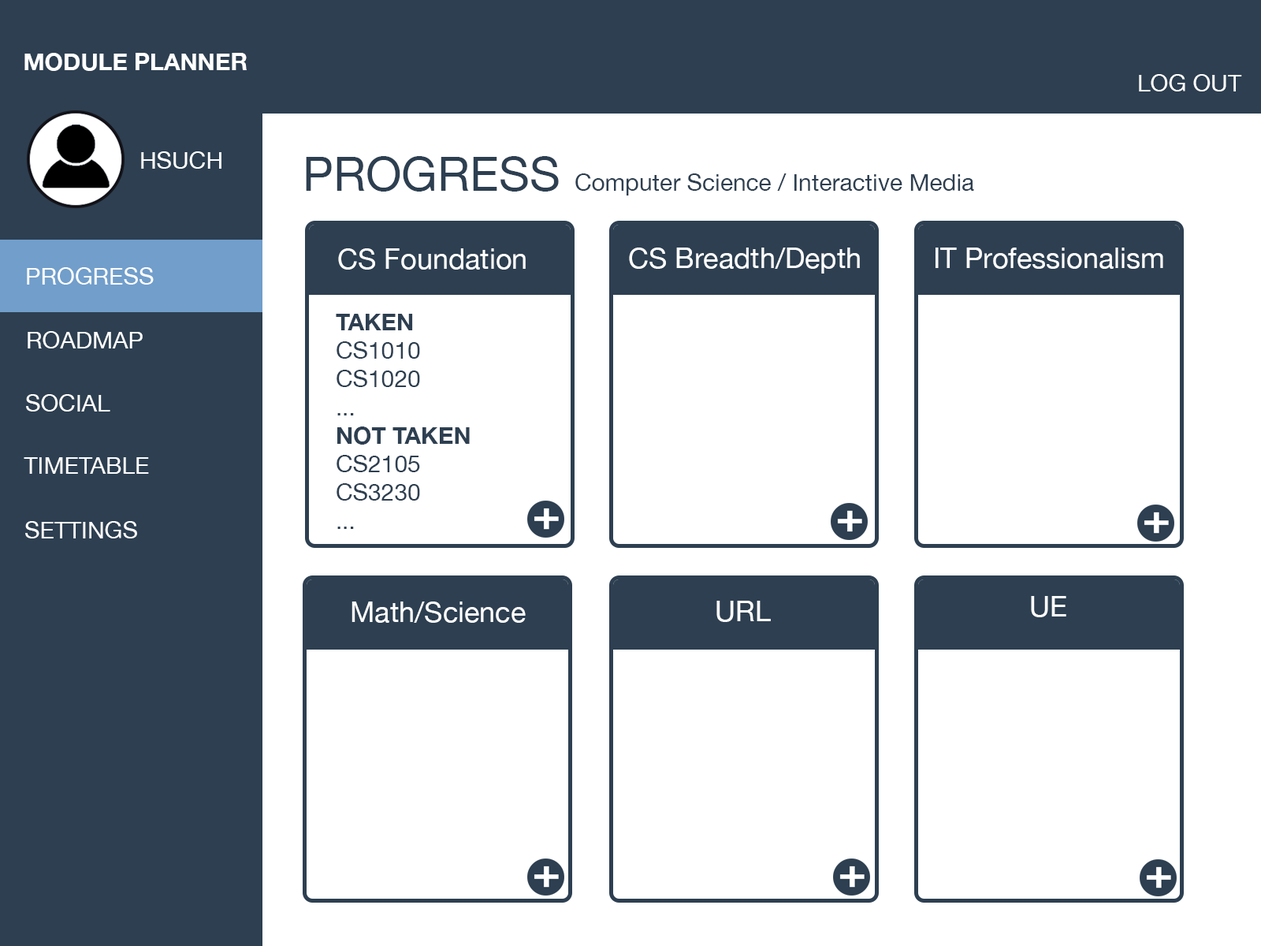
<style>
.page{position:relative;width:1261px;height:946px;background:#ffffff}
.page>*{position:absolute;margin:0}
.t1{font:23.6px "HelveticaNeue-Bold";color:#ffffff}
.t2{font:23.5px "HelveticaNeue";color:#ffffff}
.t3{font:47.3px "HelveticaNeue";color:#2d3f51}
.t4{font:23.6px "HelveticaNeue";color:#2d3f51}
.t5{font:28.4px "HelveticaNeue";color:#ffffff}
.t6{font:28.7px "HelveticaNeue";color:#ffffff}
.t7{font:23.6px "HelveticaNeue";color:#ffffff}
.t8{font:23.6px "HelveticaNeue-Bold";color:#2d3f51}
</style>
<div class="page">
<p class="t1" style="left:24px;top:53px;width:223px;height:18px">MODULE PLANNER</p>
<p class="t2" style="left:1139px;top:74px;width:103px;height:17px">LOG OUT</p>
<p class="t2" style="left:141px;top:151px;width:80px;height:18px">HSUCH</p>
<p class="t3" style="left:306px;top:156px;width:253px;height:36px">PROGRESS</p>
<p class="t4" style="left:575px;top:173px;width:399px;height:22px">Computer Science / Interactive Media</p>
<p class="t5" style="left:338px;top:248px;width:188px;height:22px">CS Foundation</p>
<p class="t6" style="left:629px;top:247px;width:231px;height:26px">CS Breadth/Depth</p>
<p class="t6" style="left:935px;top:247px;width:228px;height:22px">IT Professionalism</p>
<p class="t7" style="left:27px;top:267px;width:127px;height:17px">PROGRESS</p>
<p class="t4" style="left:336px;top:314px;width:134px;height:215px;text-align:right"><span class="t8">TAKEN<br></span>CS1010<br>CS1020<br>...<br><span class="t8">NOT TAKEN<br></span>CS2105<br>CS3230<br>...</p>
<p class="t7" style="left:28px;top:331px;width:115px;height:17px">ROADMAP</p>
<p class="t7" style="left:26px;top:394px;width:84px;height:17px">SOCIAL</p>
<p class="t7" style="left:24px;top:457px;width:125px;height:17px">TIMETABLE</p>
<p class="t7" style="left:25px;top:521px;width:112px;height:17px">SETTINGS</p>
<p class="t6" style="left:351px;top:601px;width:175px;height:22px">Math/Science</p>
<p class="t6" style="left:716px;top:601px;width:55px;height:21px">URL</p>
<p class="t5" style="left:1031px;top:596px;width:35px;height:21px">UE</p>
</div>
